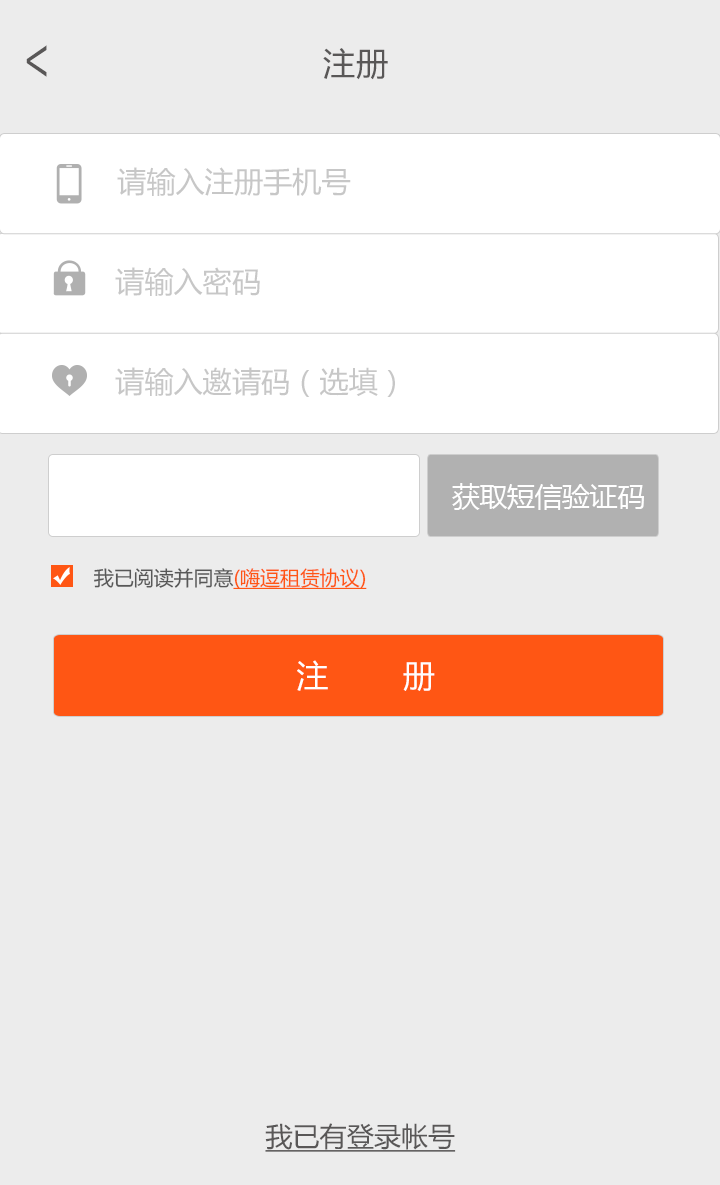
<style>
.page{position:relative;width:720px;height:1185px;background:#ececec}
.page>*{position:absolute;margin:0}
.t1{font:51.9px "AdobeHeitiStd-Regular";color:#595757;scale:0.72 1}
.t2{font:32.4px "MicrosoftYaHei";color:#595757}
.t3{font:29.2px "MicrosoftYaHei";color:#c7c7c7}
.t4{font:27.3px "MicrosoftYaHei";color:#ffffff}
.t5{font:20px "MicrosoftYaHei";color:#ff5614;text-decoration:underline}
.t6{font:20px "MicrosoftYaHei";color:#585858}
.t7{font:31.7px "MicrosoftYaHei";color:#fffefe}
.t8{font:27.1px "MicrosoftYaHei";color:#595757;text-decoration:underline}
</style>
<div class="page">
<p class="t1" style="left:26px;top:45px;width:21px;height:32px;rotate:180deg">&gt;</p>
<p class="t2" style="left:323px;top:48px;width:65px;height:32px">注册</p>
<p class="t3" style="left:117px;top:167px;width:234px;height:29px">请输入注册手机号</p>
<p class="t3" style="left:115px;top:267px;width:145px;height:29px">请输入密码</p>
<p class="t3" style="left:115px;top:367px;width:280px;height:30px">请输入邀请码（选填）</p>
<p class="t4" style="left:452px;top:483px;width:192px;height:27px">获取短信验证码</p>
<p class="t5" style="left:94px;top:568px;width:273px;height:21px"><span class="t6">我已阅读并同意</span>(嗨逗租赁协议)</p>
<p class="t7" style="left:297px;top:660px;width:138px;height:31px">注        册</p>
<p class="t8" style="left:265px;top:1123px;width:191px;height:29px">我已有登录帐号</p>
</div>
